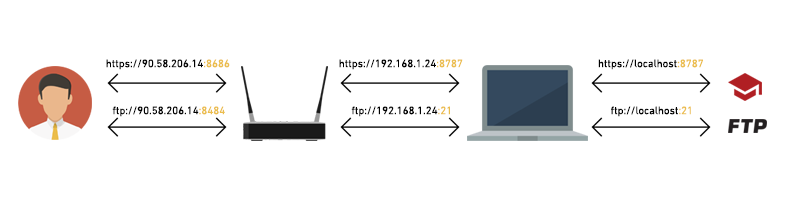
<style>
.page{position:relative;width:800px;height:200px;background:#ffffff}
.page>*{position:absolute;margin:0}
.t1{font:11px "DINNextW1G-Regular";color:#000000}
.t2{font:11px "DINNextW1G-Regular";color:#ebbd4c}
</style>
<div class="page">
<p class="t1" style="left:106px;top:59px;width:124px;height:11px">https://90.58.206.14<span class="t2">:8686</span></p>
<p class="t1" style="left:339px;top:59px;width:124px;height:11px">https://192.168.1.24<span class="t2">:8787</span></p>
<p class="t1" style="left:598px;top:59px;width:105px;height:11px">https://localhost<span class="t2">:8787</span></p>
<p class="t1" style="left:112px;top:106px;width:113px;height:11px">ftp://90.58.206.14<span class="t2">:8484</span></p>
<p class="t1" style="left:351px;top:106px;width:99px;height:11px">ftp://192.168.1.24<span class="t2">:21</span></p>
<p class="t1" style="left:611px;top:106px;width:80px;height:11px">ftp://localhost<span class="t2">:21</span></p>
</div>
